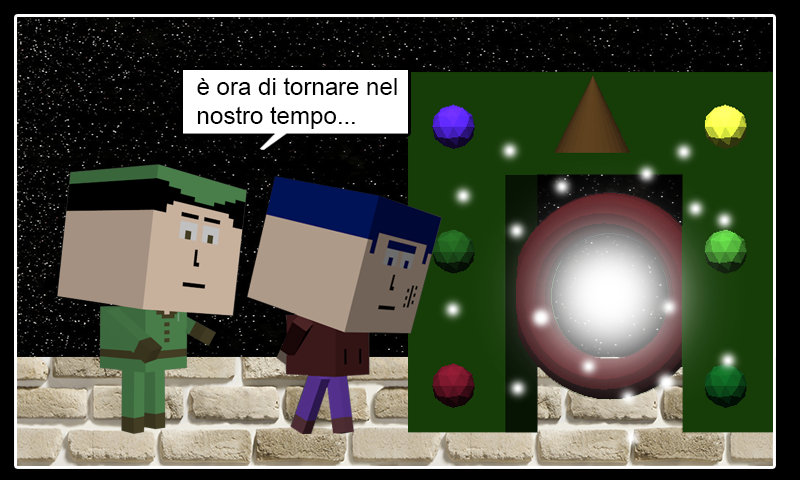
<style>
.page{position:relative;width:800px;height:480px}
.page>*{position:absolute;margin:0}
.t1{font:24px "ArialMT";color:#000000}
</style>
<div class="page">
<p class="t1" style="left:197px;top:77px;width:200px;height:52px">è ora di tornare nel<br>nostro tempo...</p>
</div>
